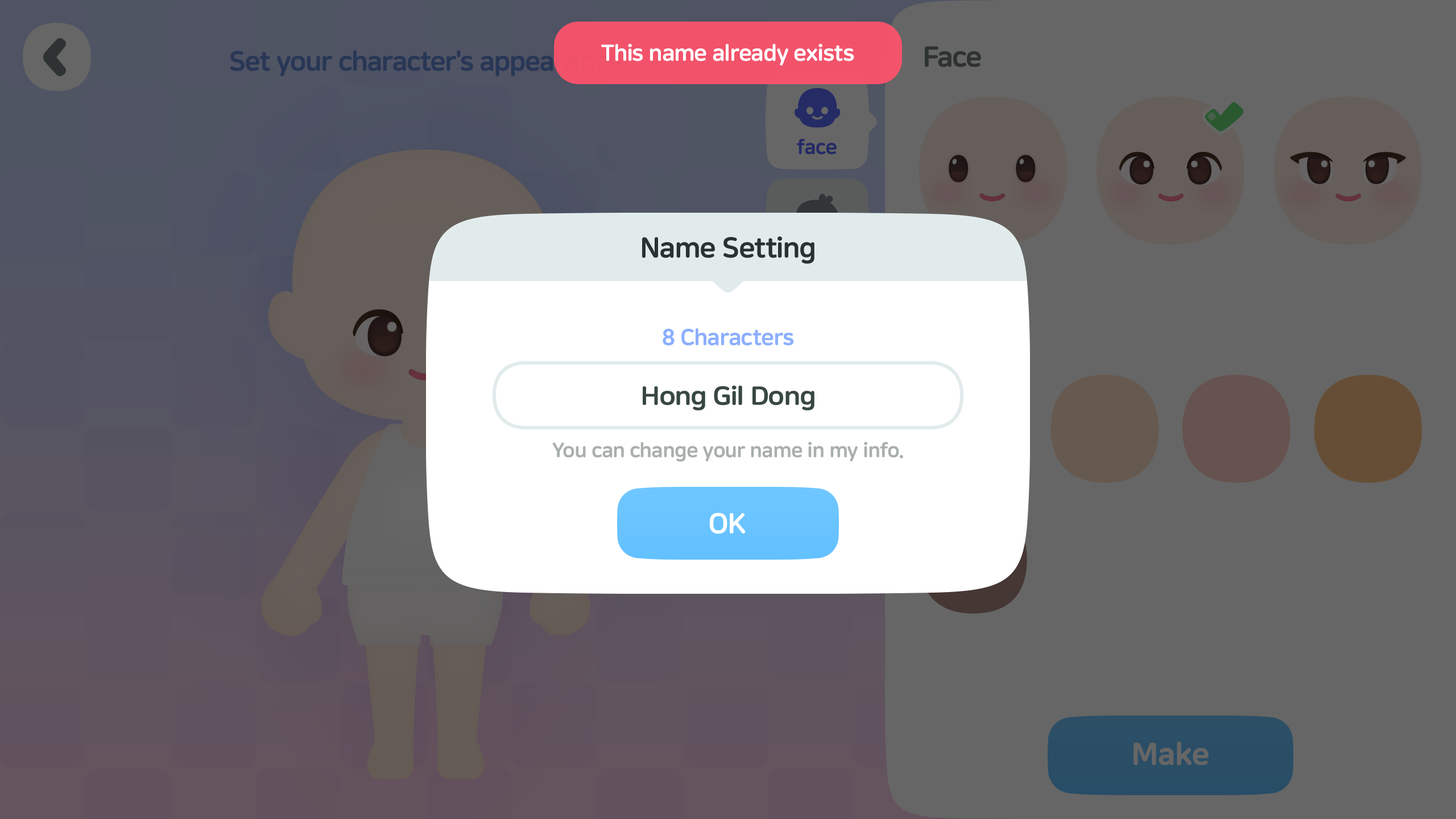
<style>
.page{position:relative;width:1456px;height:819px;background:#666666}
.page>*{position:absolute;margin:0}
.t1{font:22.7px "NanumSquareRoundEB";letter-spacing:-0.02em;color:#ffffff}
.t2{font:28.4px "NanumSquareRoundEB";letter-spacing:-0.02em;color:#283233}
.t3{font:22.7px "NanumSquareRoundEB";letter-spacing:-0.02em;color:#8cafff}
.t4{font:25.9px "NanumSquareRoundEB";letter-spacing:-0.02em;color:#384742;scale:1.05 1}
.t5{font:20.5px "NanumSquareRoundEB";letter-spacing:-0.02em;color:#a9afad}
.t6{font:28.4px "NanumSquareRoundEB";letter-spacing:-0.02em;color:#ffffff}
</style>
<div class="page">
<p class="t1" style="left:601px;top:44px;width:253px;height:22px">This name already exists</p>
<p class="t2" style="left:642px;top:236px;width:172px;height:28px">Name Setting</p>
<p class="t3" style="left:663px;top:328px;width:131px;height:18px">8 Characters</p>
<p class="t4" style="left:643px;top:386px;width:171px;height:25px">Hong Gil Dong</p>
<p class="t5" style="left:552px;top:442px;width:351px;height:20px">You can change your name in my info.</p>
<p class="t6" style="left:709px;top:512px;width:37px;height:22px">OK</p>
</div>
